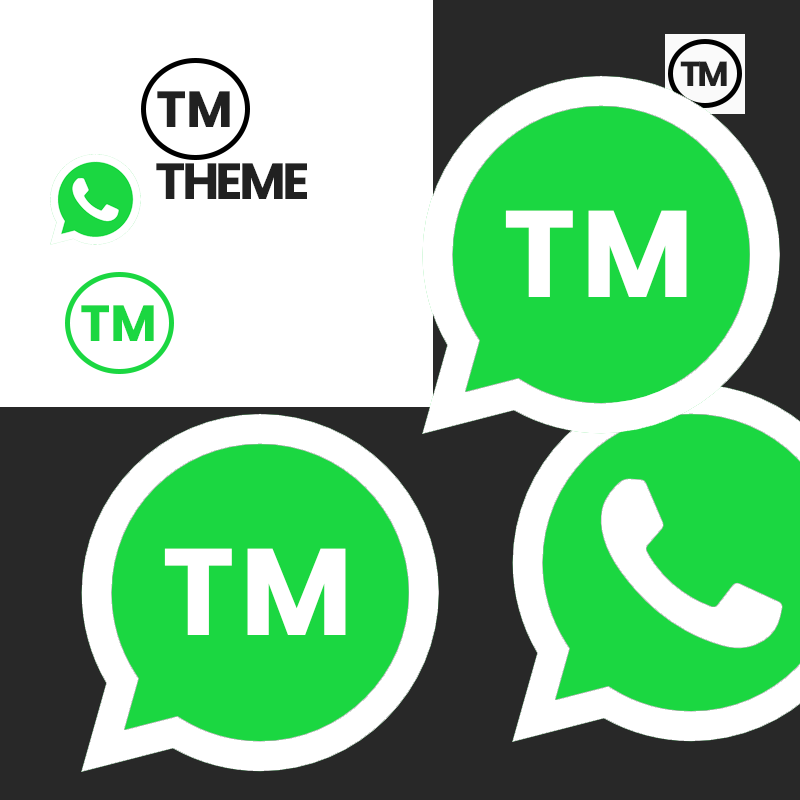
<style>
.page{position:relative;width:800px;height:800px;background:#ffffff}
.page>*{position:absolute;margin:0}
.t1{font:34.7px "Poppins-Bold";color:#212121}
.t2{font:51px "Poppins-Bold";color:#212121}
.t3{font:51px "Poppins-Bold";letter-spacing:-0.075em;color:#212121}
.t4{font:122.9px "Poppins-Bold";color:#ffffff}
.t5{font:51px "Poppins-Bold";color:#1bd741}
</style>
<div class="page">
<p class="t1" style="left:680px;top:61px;width:20px;height:25px">T</p>
<p class="t1" style="left:699px;top:61px;width:28px;height:25px">M</p>
<p class="t2" style="left:157px;top:91px;width:28px;height:36px">T</p>
<p class="t2" style="left:189px;top:91px;width:41px;height:36px">M</p>
<p class="t3" style="left:156px;top:163px;width:151px;height:36px">THEME</p>
<p class="t4" style="left:505px;top:210px;width:68px;height:87px">T</p>
<p class="t4" style="left:588px;top:210px;width:99px;height:87px">M</p>
<p class="t5" style="left:81px;top:305px;width:28px;height:36px">T</p>
<p class="t5" style="left:113px;top:305px;width:41px;height:36px">M</p>
<p class="t4" style="left:164px;top:548px;width:68px;height:87px">T</p>
<p class="t4" style="left:247px;top:548px;width:99px;height:87px">M</p>
</div>
